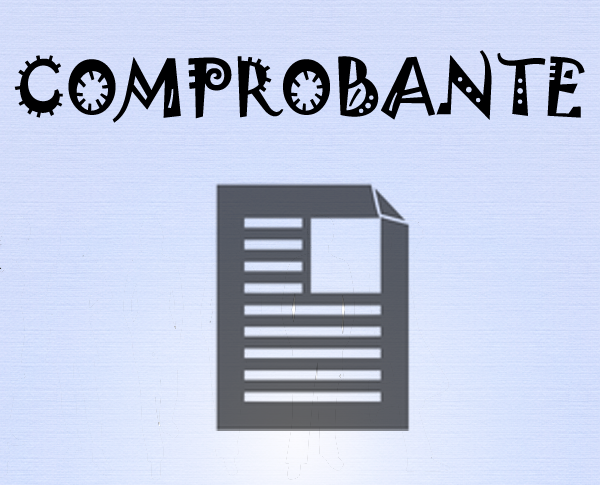
<style>
.page{position:relative;width:600px;height:485px}
.page>*{position:absolute;margin:0}
.t1{font:70px "Jokerman-Regular";color:#000001}
</style>
<div class="page">
<p class="t1" style="left:14px;top:50px;width:571px;height:73px">COMPROBANTE</p>
</div>
